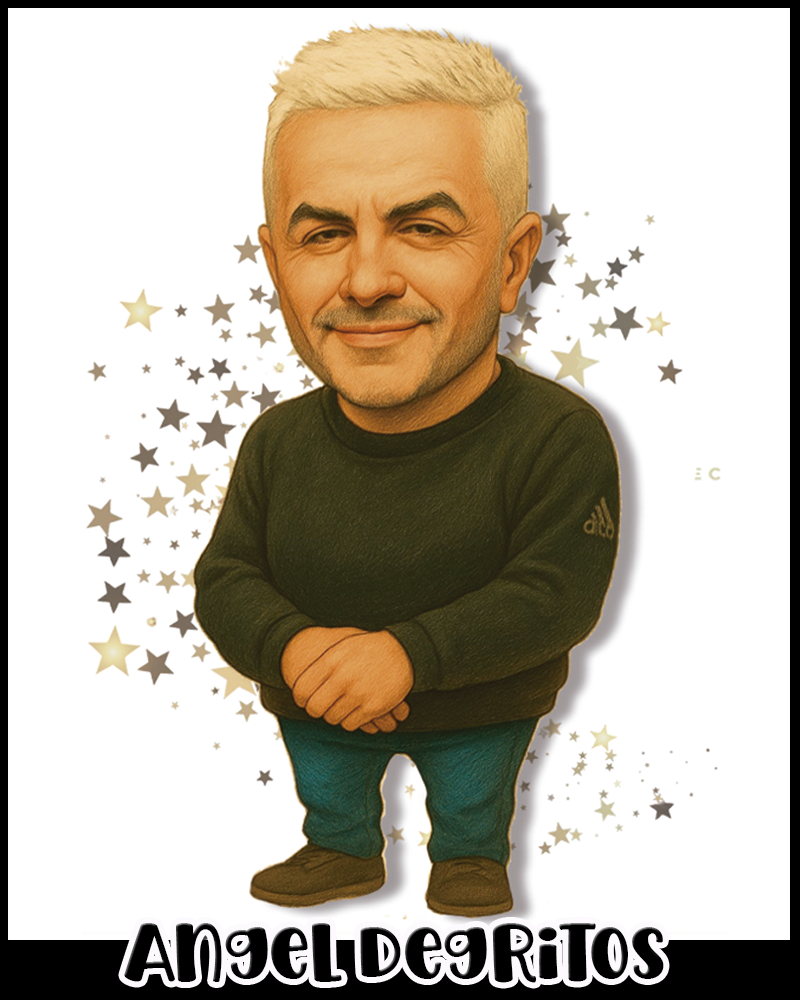
<style>
.page{position:relative;width:800px;height:1000px;background:#ffffff}
.page>*{position:absolute;margin:0}
.t1{font:80.3px "SuperSunkissed";color:#000000}
</style>
<div class="page">
<p class="t1" style="left:124px;top:923px;width:540px;height:60px">Angel Degritos</p>
</div>
